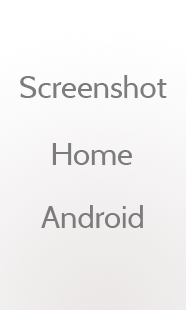
<style>
.page{position:relative;width:186px;height:310px}
.page>*{position:absolute;margin:0}
.t1{font:30.9px "Cabin-Regular";color:#7c7c7c}
</style>
<div class="page">
<p class="t1" style="left:20px;top:75px;width:147px;height:23px">Screenshot</p>
<p class="t1" style="left:52px;top:143px;width:80px;height:22px">Home</p>
<p class="t1" style="left:41px;top:205px;width:102px;height:23px">Android</p>
</div>
